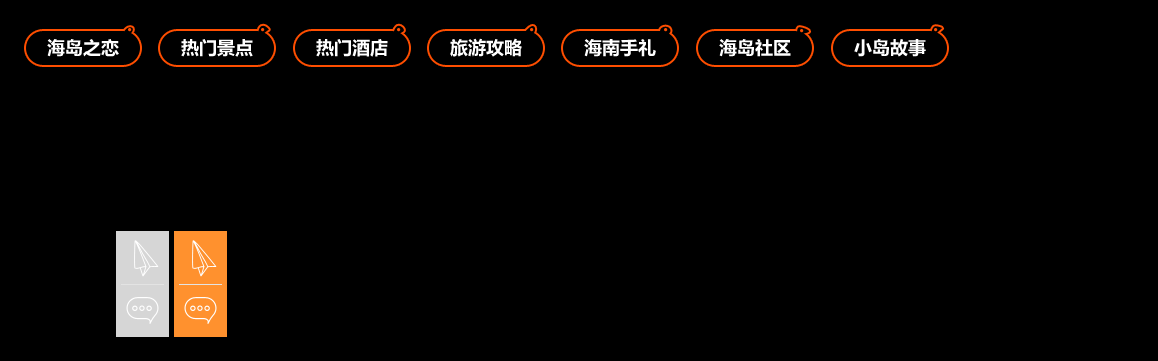
<style>
.page{position:relative;width:1158px;height:361px;background:#000000}
.page>*{position:absolute;margin:0}
.t1{font:18px "MicrosoftYaHei-Bold";color:#ffffff}
</style>
<div class="page">
<p class="t1" style="left:47px;top:39px;width:72px;height:18px">海岛之恋</p>
<p class="t1" style="left:181px;top:39px;width:72px;height:18px">热门景点</p>
<p class="t1" style="left:316px;top:39px;width:72px;height:18px">热门酒店</p>
<p class="t1" style="left:450px;top:38px;width:72px;height:19px">旅游攻略</p>
<p class="t1" style="left:584px;top:39px;width:72px;height:18px">海南手礼</p>
<p class="t1" style="left:719px;top:39px;width:72px;height:18px">海岛社区</p>
<p class="t1" style="left:854px;top:39px;width:72px;height:18px">小岛故事</p>
</div>
